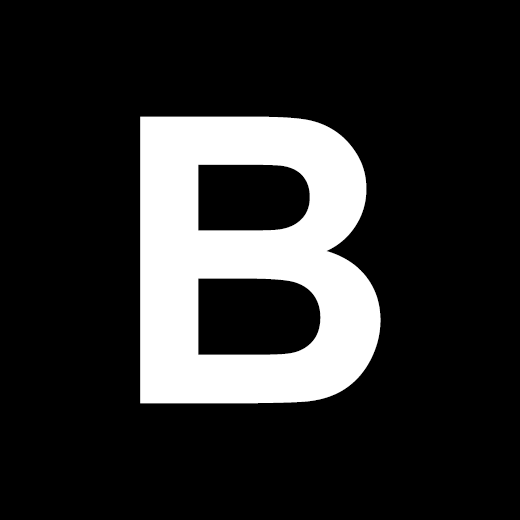
<style>
.page{position:relative;width:520px;height:520px;background:#000000}
.page>*{position:absolute;margin:0}
.t1{font:400px "Arial-BoldMT";letter-spacing:-0.01em;color:#ffffff}
</style>
<div class="page">
<p class="t1" style="left:140px;top:116px;width:241px;height:288px">B</p>
</div>
